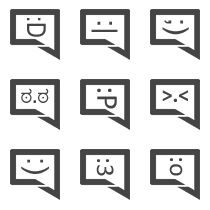
<style>
.page{position:relative;width:210px;height:210px;background:#ffffff}
.page>*{position:absolute;margin:0}
.t1{font:25.2px "Mangal";color:#444444;scale:0.85 1}
.t2{font:27px "Mangal";color:#444444;scale:1.07 1}
.t3{font:18.7px "Tunga";color:#444444}
.t4{font:18.7px "Calibri-Bold";color:#444444}
.t5{font:30.7px "Calibri";color:#444444}
.t6{font:21.7px "Calibri-Bold";color:#444444}
.t7{font:30.3px "ArialMT";color:#444444}
.t8{font:25.8px "Calibri";color:#444444}
</style>
<div class="page">
<p class="t1" style="left:27px;top:18px;width:19px;height:19px;rotate:90deg">:D</p>
<p class="t2" style="left:91px;top:21px;width:27px;height:11px;rotate:90deg">:|</p>
<p class="t2" style="left:162px;top:20px;width:27px;height:15px;rotate:90deg">;)</p>
<p class="t3" style="left:21px;top:88px;width:28px;height:15px">ಠ<span class="t4">.</span>ಠ</p>
<p class="t5" style="left:97px;top:88px;width:20px;height:21px;rotate:90deg">:P</p>
<p class="t6" style="left:162px;top:90px;width:26px;height:12px">&gt;.&lt;</p>
<p class="t7" style="left:21px;top:159px;width:28px;height:15px;rotate:90deg">:)</p>
<p class="t8" style="left:96px;top:159px;width:18px;height:17px;rotate:90deg">:3</p>
<p class="t8" style="left:169px;top:158px;width:14px;height:18px;rotate:90deg">:o</p>
</div>
